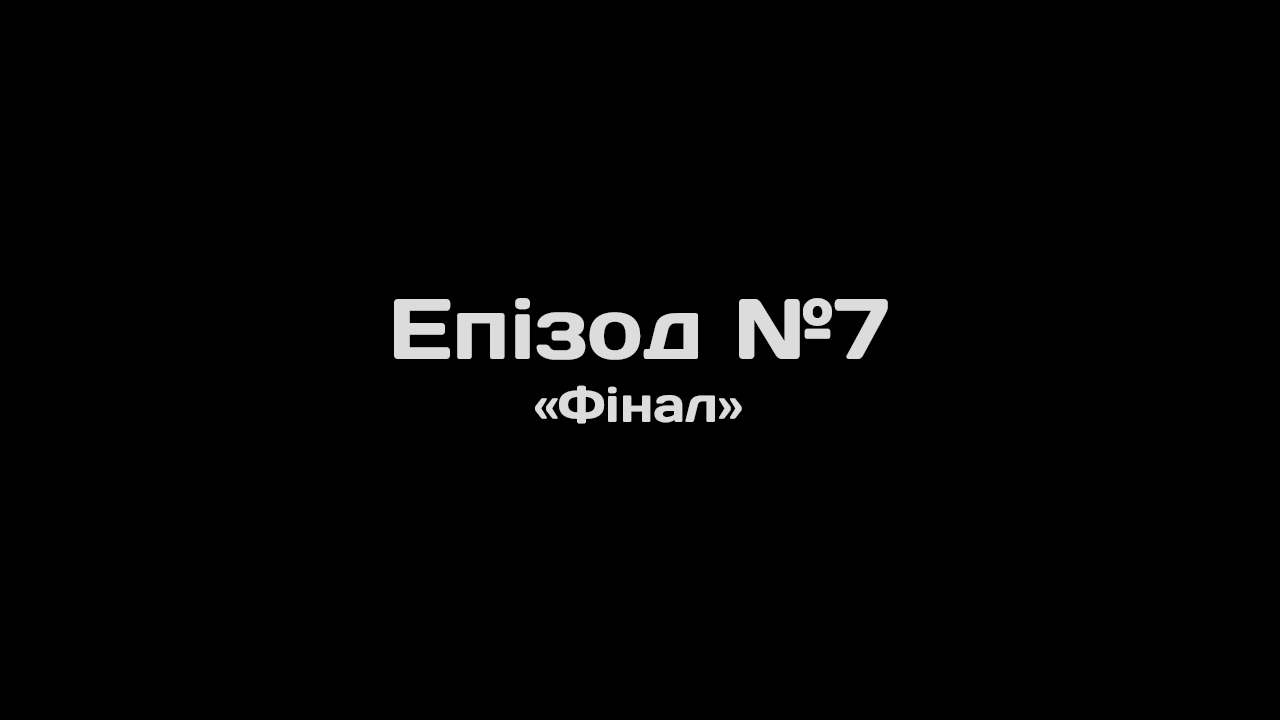
<style>
.page{position:relative;width:1280px;height:720px;background:#000000}
.page>*{position:absolute;margin:0}
.t1{font:85.7px "Days";color:#dcdcdc}
.t2{font:49.4px "Days";color:#dcdcdc}
</style>
<div class="page">
<p class="t1" style="left:394px;top:298px;width:494px;height:62px">Епізод №7</p>
<p class="t2" style="left:535px;top:385px;width:207px;height:39px">«Фінал»</p>
</div>
